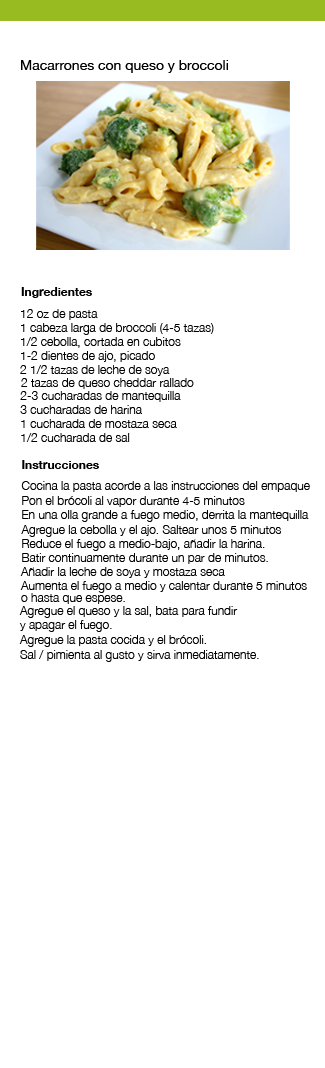
<style>
.page{position:relative;width:325px;height:1068px;background:#ffffff}
.page>*{position:absolute;margin:0}
.t1{font:14px "HelveticaNeue";color:#000000}
.t2{font:12px "HelveticaNeue-Bold";color:#000000}
.t3{font:12px "HelveticaNeue-Light";color:#000000}
</style>
<div class="page">
<p class="t1" style="left:21px;top:60px;width:207px;height:13px">Macarrones con queso y broccoli</p>
<p class="t2" style="left:21px;top:287px;width:71px;height:11px">Ingredientes</p>
<p class="t3" style="left:21px;top:309px;width:77px;height:11px">12 oz de pasta</p>
<p class="t3" style="left:21px;top:323px;width:193px;height:12px">1 cabeza larga de broccoli (4-5 tazas)</p>
<p class="t3" style="left:21px;top:337px;width:160px;height:11px">1/2 cebolla, cortada en cubitos</p>
<p class="t3" style="left:21px;top:351px;width:134px;height:11px">1-2 dientes de ajo, picado</p>
<p class="t3" style="left:20px;top:365px;width:150px;height:11px">2 1/2 tazas de leche de soya</p>
<p class="t3" style="left:21px;top:378px;width:173px;height:11px">2 tazas de queso cheddar rallado</p>
<p class="t3" style="left:20px;top:391px;width:161px;height:11px">2-3 cucharadas de mantequilla</p>
<p class="t3" style="left:20px;top:405px;width:122px;height:9px">3 cucharadas de harina</p>
<p class="t3" style="left:21px;top:419px;width:156px;height:9px">1 cucharada de mostaza seca</p>
<p class="t3" style="left:21px;top:433px;width:109px;height:9px">1/2 cucharada de sal</p>
<p class="t2" style="left:22px;top:460px;width:77px;height:9px">Instrucciones</p>
<p class="t3" style="left:21px;top:481px;width:289px;height:11px">Cocina la pasta acorde a las instrucciones del empaque</p>
<p class="t3" style="left:22px;top:496px;width:223px;height:11px">Pon el brócoli al vapor durante 4-5 minutos</p>
<p class="t3" style="left:22px;top:510px;width:287px;height:12px">En una olla grande a fuego medio, derrita la mantequilla</p>
<p class="t3" style="left:21px;top:525px;width:260px;height:12px">Agregue la cebolla y el ajo. Saltear unos 5 minutos</p>
<p class="t3" style="left:22px;top:539px;width:243px;height:12px">Reduce el fuego a medio-bajo, añadir la harina.</p>
<p class="t3" style="left:22px;top:553px;width:246px;height:11px">Batir continuamente durante un par de minutos.</p>
<p class="t3" style="left:20px;top:567px;width:205px;height:11px">Añadir la leche de soya y mostaza seca</p>
<p class="t3" style="left:20px;top:581px;width:287px;height:12px">Aumenta el fuego a medio y calentar durante 5 minutos</p>
<p class="t3" style="left:21px;top:593px;width:104px;height:11px">o hasta que espese.</p>
<p class="t3" style="left:19px;top:606px;width:219px;height:12px">Agregue el queso y la sal, bata para fundir</p>
<p class="t3" style="left:19px;top:620px;width:93px;height:12px">y apagar el fuego.</p>
<p class="t3" style="left:19px;top:635px;width:187px;height:12px">Agregue la pasta cocida y el brócoli.</p>
<p class="t3" style="left:20px;top:650px;width:239px;height:12px">Sal / pimienta al gusto y sirva inmediatamente.</p>
</div>
